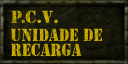
<style>
.page{position:relative;width:128px;height:64px}
.page>*{position:absolute;margin:0}
.t1{font:18.3px "Army"}
.t2{font:18.4px/15.3px "Army";color:#cbad03;scale:0.87 1}
</style>
<div class="page">
<p class="t1" style="left:11px;top:10px;width:47px;height:13px">P.c.v.</p>
<p class="t2" style="left:11px;top:28px;width:91px;height:29px">UNIDADE DE<br>RECARGA</p>
</div>
